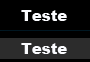
<style>
.page{position:relative;width:90px;height:62px;background:#000000}
.page>*{position:absolute;margin:0}
.t1{font:14.8px "Arial-Black";color:#fbfcff}
</style>
<div class="page">
<p class="t1" style="left:21px;top:10px;width:46px;height:11px">Teste</p>
<p class="t1" style="left:21px;top:43px;width:46px;height:11px">Teste</p>
</div>
